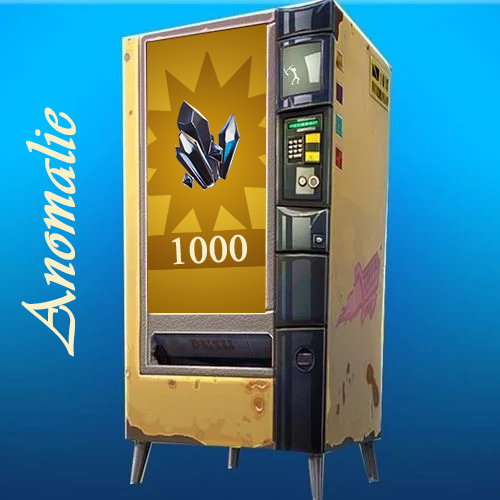
<style>
.page{position:relative;width:500px;height:500px}
.page>*{position:absolute;margin:0}
.t1{font:72px "Vivaldii";color:#f8f1c8;font-weight:bold}
.t2{font:38px "TimesNewRomanPSMT";color:#f8f1c8;font-weight:bold}
</style>
<div class="page">
<p class="t1" style="left:21px;top:107px;width:55px;height:250px;rotate:-90deg">Anomalie</p>
<p class="t2" style="left:172px;top:234px;width:75px;height:31px;rotate:-3deg">1000</p>
</div>
